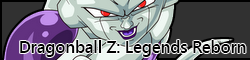
<style>
.page{position:relative;width:250px;height:60px;background:#313131}
.page>*{position:absolute;margin:0}
.t1{font:16.6px "SegoeUI-Semibold";color:#000000}
</style>
<div class="page">
<p class="t1" style="left:20px;top:40px;width:226px;height:17px">Dragonball Z: Legends Reborn</p>
</div>
